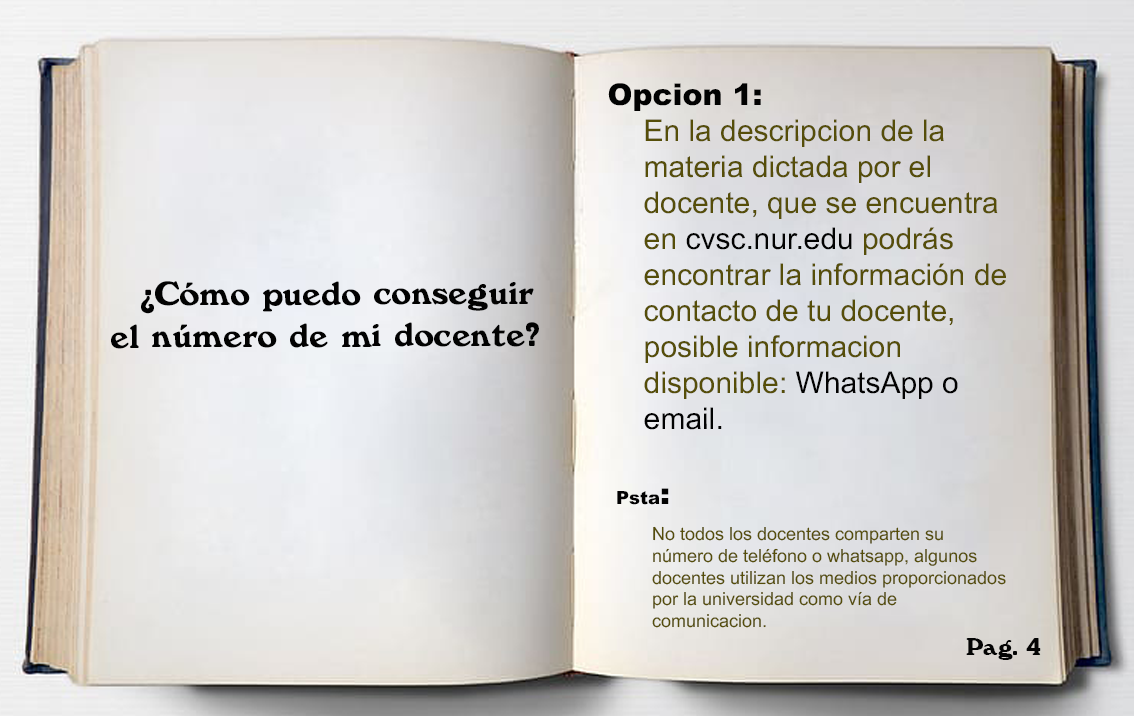
<style>
.page{position:relative;width:1134px;height:716px}
.page>*{position:absolute;margin:0}
.t1{font:30px "ArialMT";color:#564e09}
.t2{font:30px "Arial-Black";color:#020202}
.t3{font:30px "ArialMT";color:#020202}
.t4{font:35px "Windsor-Regular";color:#020202}
.t5{font:18px "ArialMT";color:#564e09}
.t6{font:18px "Arial-Black";color:#020202}
.t7{font:25px "Windsor-Regular";color:#040404}
</style>
<div class="page">
<p class="t1" style="left:608px;top:83px;width:398px;height:347px"><span class="t2">Opcion 1: <br>  </span>En la descripcion de la <br> materia dictada por el <br> docente, que se encuentra<br> en <span class="t3">cvsc.nur.edu</span> podrás <br> encontrar la información de <br> contacto de tu docente, <br> posible informacion <br> disponible: <span class="t3">WhatsApp o<br> email.</span></p>
<p class="t4" style="left:111px;top:281px;width:428px;height:68px;text-align:center">¿Cómo puedo conseguir<br> el número de mi docente?</p>
<p class="t5" style="left:617px;top:488px;width:389px;height:140px"><span class="t6">Psta</span><span class="t2">: <br> </span>No todos los docentes comparten su <br> número de teléfono o whatsapp, algunos <br> docentes utilizan los medios proporcionados<br> por la universidad como vía de <br> comunicacion.</p>
<p class="t7" style="left:966px;top:638px;width:75px;height:22px">Pag. 4</p>
</div>
